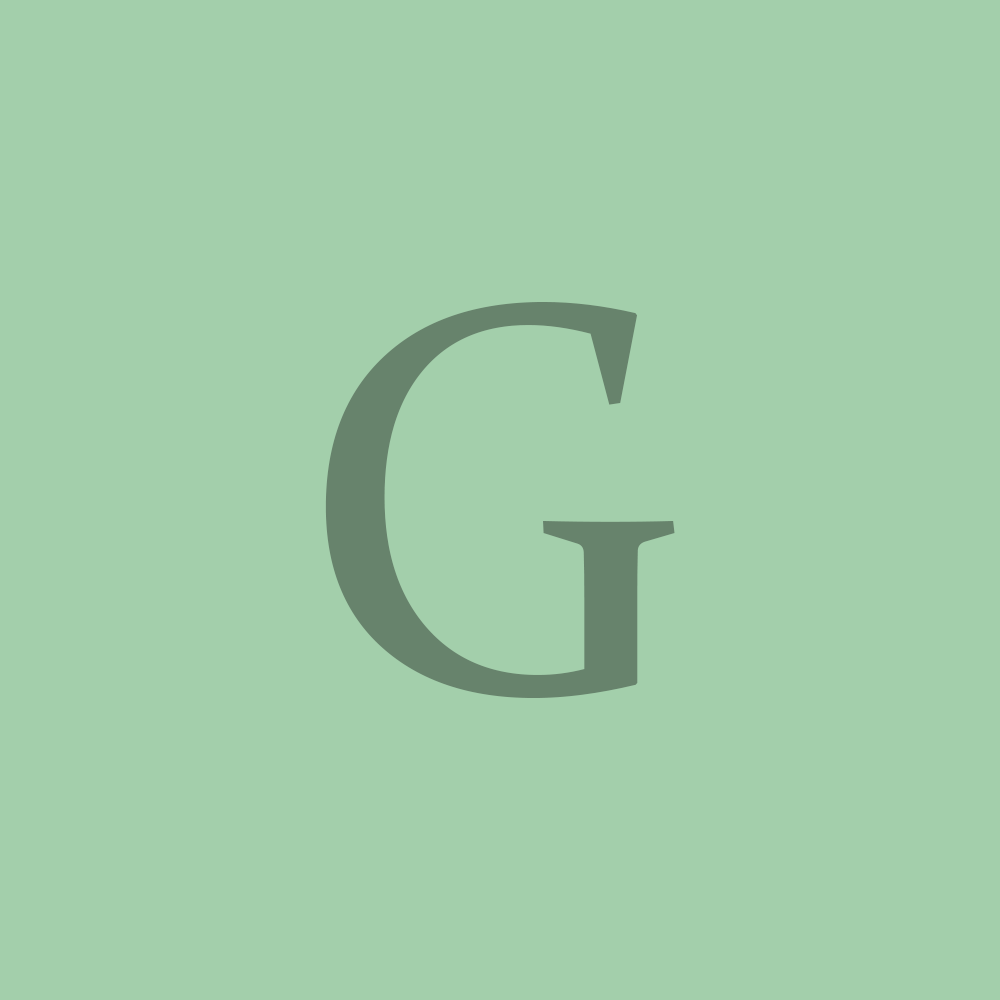
<style>
.page{position:relative;width:1000px;height:1000px;background:#a3cfab}
.page>*{position:absolute;margin:0}
.t1{font:555.6px "Constantia";color:#67836c}
</style>
<div class="page">
<p class="t1" style="left:325px;top:302px;width:350px;height:396px">G</p>
</div>
